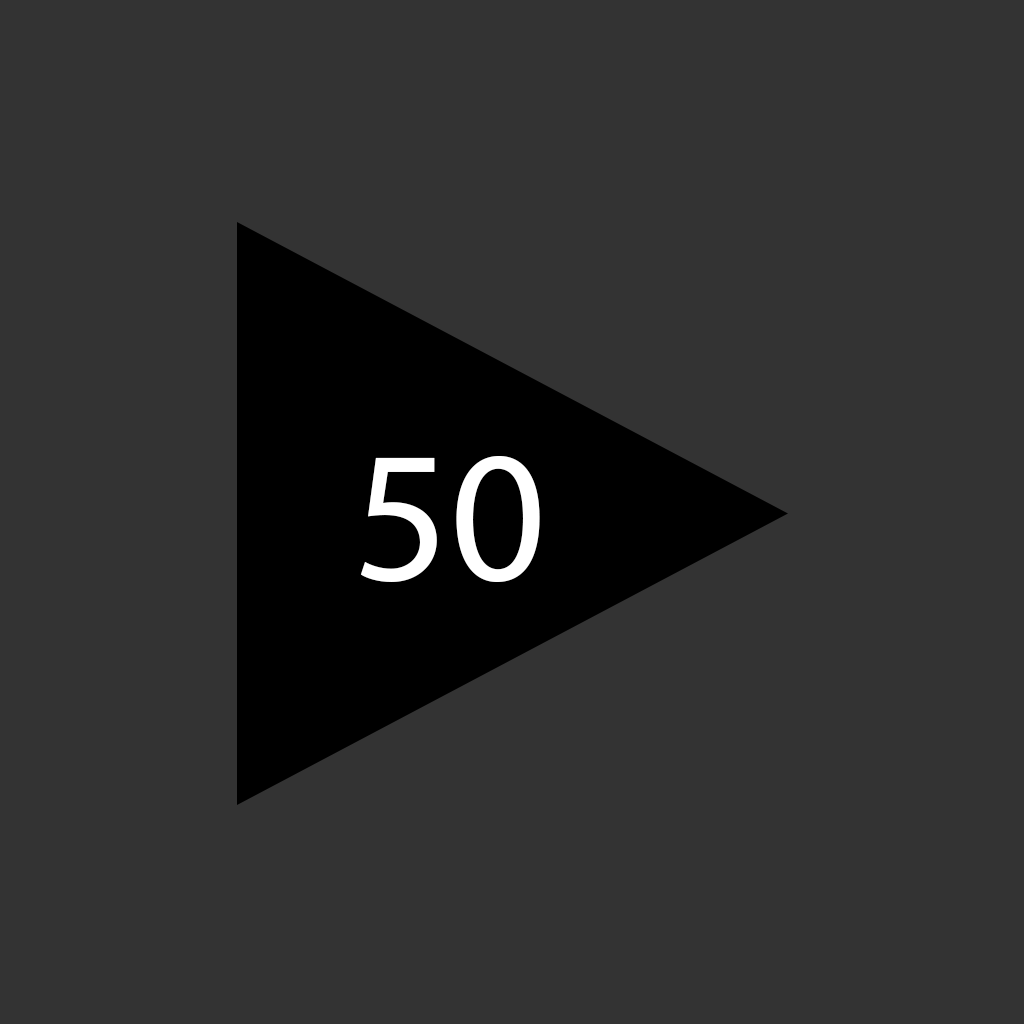
<style>
.page{position:relative;width:1024px;height:1024px;background:#333333}
.page>*{position:absolute;margin:0}
.t1{font:187.5px "MyriadPro-Regular";color:#ffffff}
</style>
<div class="page">
<p class="t1" style="left:360px;top:456px;width:180px;height:126px">50</p>
</div>
